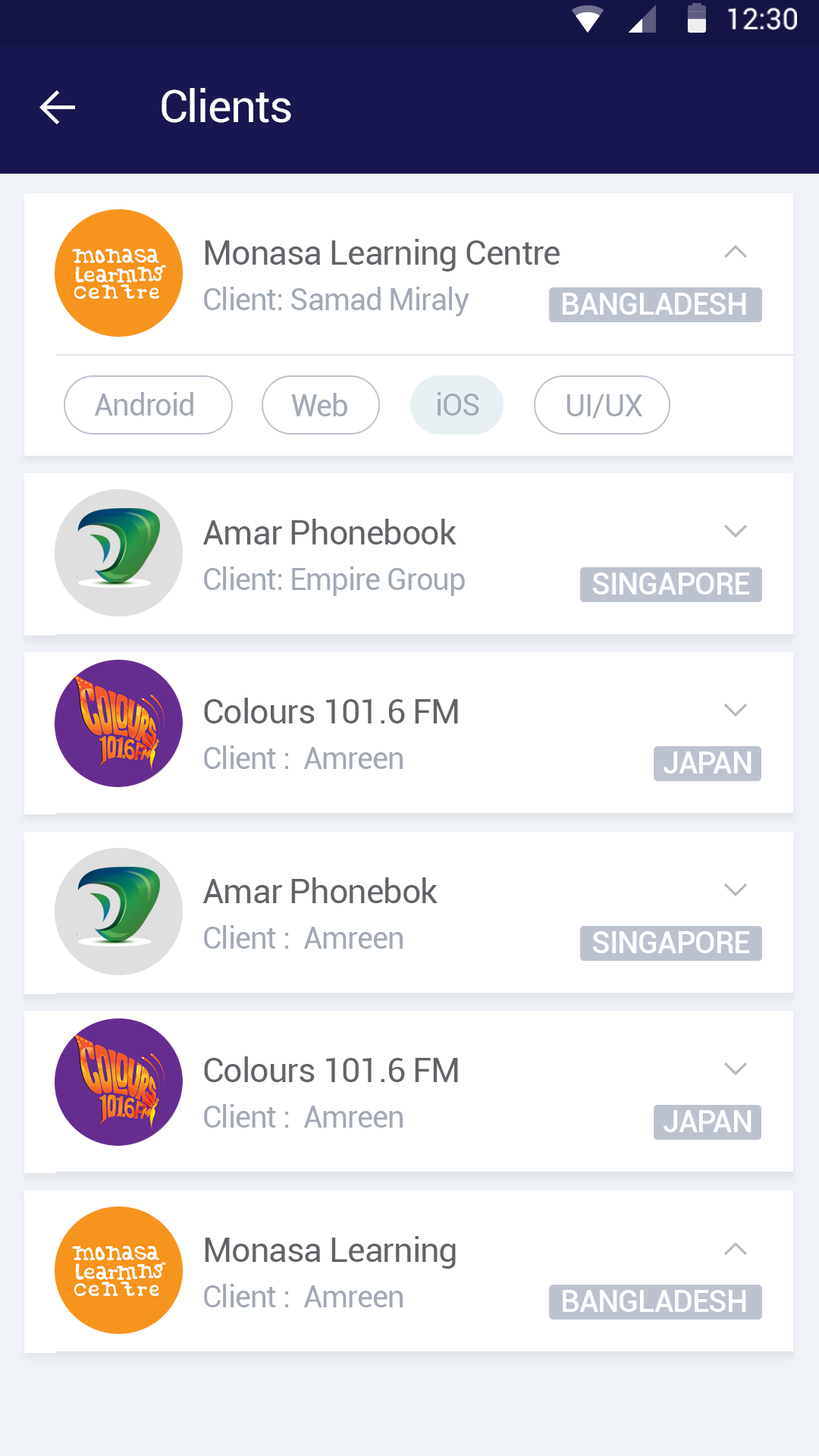
<style>
.page{position:relative;width:819px;height:1456px;background:#ffffff}
.page>*{position:absolute;margin:0}
.t1{font:45.5px "Roboto-Regular";letter-spacing:-0.025em;color:#ffffff}
.t2{font:34.1px "Roboto-Regular";letter-spacing:-0.025em;color:#616468}
.t3{font:30.3px "Roboto-Regular";letter-spacing:-0.025em;color:#a1a9b4}
.t4{font:30.3px "Roboto-Medium";letter-spacing:-0.025em;color:#ffffff}
</style>
<div class="page">
<p class="t1" style="left:162px;top:88px;width:129px;height:35px">Clients</p>
<p class="t2" style="left:205px;top:239px;width:355px;height:32px">Monasa Learning Centre</p>
<p class="t3" style="left:204px;top:287px;width:265px;height:29px">Client: Samad Miraly</p>
<p class="t4" style="left:563px;top:293px;width:183px;height:22px">BANGLADESH</p>
<p class="t3" style="left:94px;top:392px;width:99px;height:24px">Android</p>
<p class="t3" style="left:291px;top:393px;width:56px;height:23px">Web</p>
<p class="t3" style="left:438px;top:392px;width:41px;height:24px">iOS</p>
<p class="t3" style="left:566px;top:394px;width:76px;height:25px">UI/UX</p>
<p class="t2" style="left:203px;top:519px;width:254px;height:25px">Amar Phonebook</p>
<p class="t3" style="left:204px;top:566px;width:261px;height:30px">Client: Empire Group</p>
<p class="t4" style="left:593px;top:573px;width:156px;height:22px">SINGAPORE</p>
<p class="t2" style="left:204px;top:698px;width:254px;height:25px">Colours 101.6 FM</p>
<p class="t3" style="left:204px;top:745px;width:199px;height:24px">Client :  Amreen</p>
<p class="t4" style="left:664px;top:751px;width:87px;height:22px">JAPAN</p>
<p class="t2" style="left:203px;top:877px;width:235px;height:26px">Amar Phonebok</p>
<p class="t3" style="left:204px;top:925px;width:199px;height:24px">Client :  Amreen</p>
<p class="t4" style="left:593px;top:931px;width:156px;height:22px">SINGAPORE</p>
<p class="t2" style="left:204px;top:1056px;width:254px;height:26px">Colours 101.6 FM</p>
<p class="t3" style="left:204px;top:1104px;width:199px;height:24px">Client :  Amreen</p>
<p class="t4" style="left:664px;top:1110px;width:87px;height:22px">JAPAN</p>
<p class="t2" style="left:205px;top:1236px;width:251px;height:33px">Monasa Learning</p>
<p class="t3" style="left:204px;top:1284px;width:199px;height:23px">Client :  Amreen</p>
<p class="t4" style="left:563px;top:1290px;width:183px;height:22px">BANGLADESH</p>
</div>
